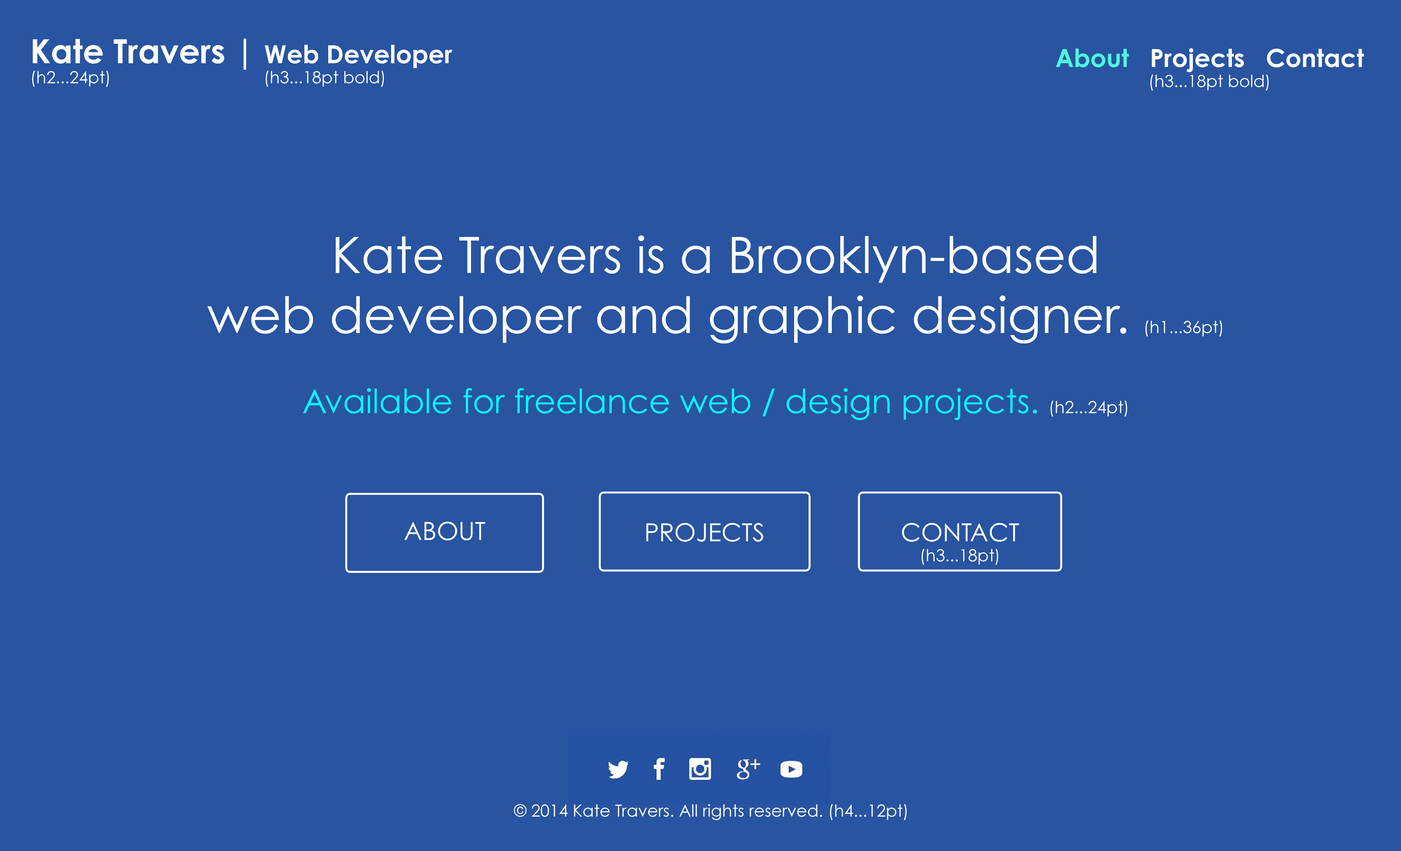
<style>
.page{position:relative;width:1401px;height:851px;background:#2854a1}
.page>*{position:absolute;margin:0}
.t1{font:16.7px "CenturyGothic";color:#ffffff}
.t2{font:33.4px/33.4px "CenturyGothic-Bold";color:#ffffff}
.t3{font:25px/33.4px "CenturyGothic-Bold";color:#ffffff}
.t4{font:25px "CenturyGothic-Bold";color:#ffffff}
.t5{font:25px "CenturyGothic-Bold";color:#4ff5dc}
.t6{font:50.1px "CenturyGothic";color:#ffffff}
.t7{font:33.4px "CenturyGothic";color:#00ffff}
.t8{font:25px "CenturyGothic";color:#ffffff}
</style>
<div class="page">
<p class="t1" style="left:32px;top:38px;width:420px;height:49px"><span class="t2">Kate Travers | </span><span class="t3">Web Developer <br></span>(h2...24pt)                                 (h3...18pt bold)</p>
<p class="t4" style="left:1056px;top:48px;width:308px;height:42px"><span class="t5">About</span>   Projects   Contact <span class="t1">(h3...18pt bold)</span></p>
<p class="t6" style="left:208px;top:235px;width:1015px;height:185px;text-align:center">Kate Travers is a Brooklyn-based <br>web developer and graphic designer. <span class="t1">(h1...36pt) <br><br></span><span class="t7">Available for freelance web / design projects. </span><span class="t1">(h2...24pt)</span></p>
<p class="t8" style="left:404px;top:522px;width:81px;height:19px">ABOUT</p>
<p class="t8" style="left:646px;top:523px;width:117px;height:19px">PROJECTS</p>
<p class="t1" style="left:902px;top:523px;width:117px;height:42px"><span class="t8">CONTACT </span>(h3...18pt)</p>
<p class="t1" style="left:514px;top:804px;width:393px;height:16px">© 2014 Kate Travers. All rights reserved. (h4...12pt)</p>
</div>
